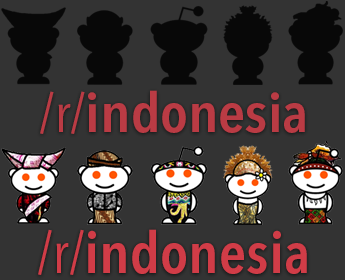
<style>
.page{position:relative;width:345px;height:280px;background:#333333}
.page>*{position:absolute;margin:0}
.t1{font:54.2px "AvenirNextLTPro-DemiCn";color:#ba3b44;scale:1.1 1}
.t2{font:54.2px "AvenirNextLTPro-Cn";color:#ba3b44;scale:1.1 1}
.t3{font:57.8px "AvenirNextLTPro-DemiCn";color:#d13c47;scale:1.05 1}
.t4{font:57.8px "AvenirNextLTPro-Cn";color:#d13c47;scale:1.05 1}
</style>
<div class="page">
<p class="t1" style="left:40px;top:90px;width:265px;height:44px"><span class="t2">/r/</span>indonesia</p>
<p class="t3" style="left:38px;top:229px;width:269px;height:46px"><span class="t4">/r/</span>indonesia</p>
</div>
